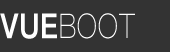
<style>
.page{position:relative;width:170px;height:52px;background:#333333}
.page>*{position:absolute;margin:0}
.t1{font:34px "PingFangTC-Thin";color:#ffffff;scale:0.8 1}
.t2{font:34px "PingFangHK-Semibold";color:#ffffff;font-weight:bold;scale:0.8 1}
</style>
<div class="page">
<p class="t1" style="left:0px;top:13px;width:135px;height:26px"><span class="t2">VUE</span>BOOT</p>
</div>
